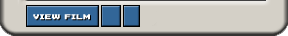
<style>
.page{position:relative;width:288px;height:36px;background:#d4d0c7}
.page>*{position:absolute;margin:0}
.t1{font:7.5px "04b11";letter-spacing:0.01em;color:#ffffff;font-weight:bold}
</style>
<div class="page">
<p class="t1" style="left:33px;top:14px;width:57px;height:6px">VIEW FILM</p>
</div>
